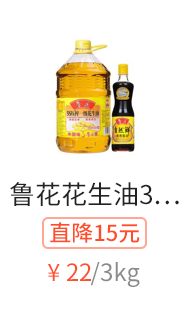
<style>
.page{position:relative;width:188px;height:330px;background:#ffffff}
.page>*{position:absolute;margin:0}
.t1{font:26px "SourceHanSansCN-Regular";color:#222222}
.t2{font:22px "SourceHanSansCN-Medium";color:#ff4d29}
.t3{font:24px "SourceHanSansCN-Regular";color:#ff4d29}
.t4{font:24px "SourceHanSansCN-Regular";color:#888888}
</style>
<div class="page">
<p class="t1" style="left:10px;top:182px;width:169px;height:24px">鲁花花生油3…</p>
<p class="t2" style="left:50px;top:222px;width:90px;height:21px">直降15元</p>
<p class="t3" style="left:47px;top:263px;width:44px;height:18px">¥ 22</p>
<p class="t4" style="left:90px;top:262px;width:50px;height:25px">/3kg</p>
</div>
